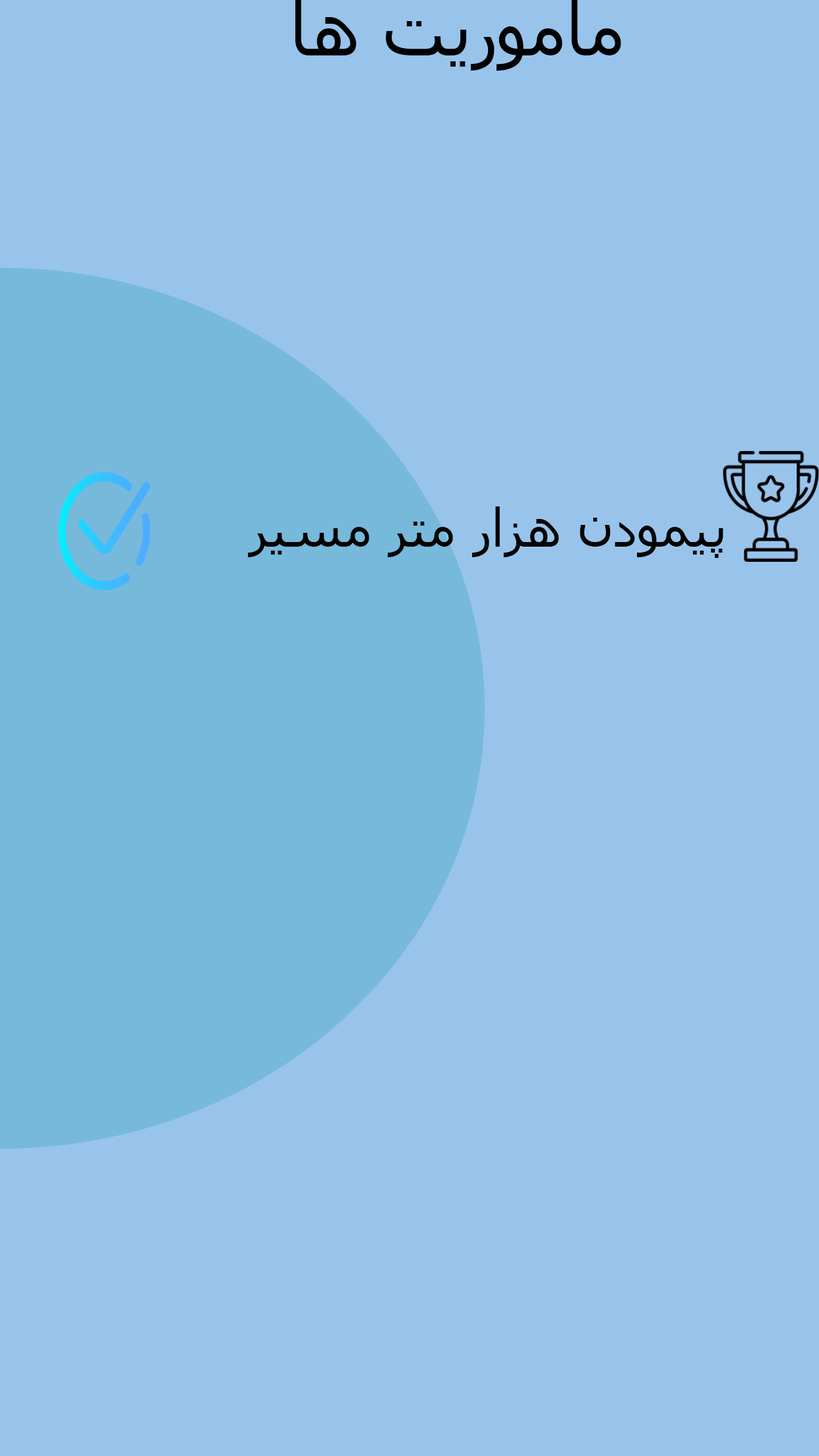
<style>
.page{position:relative;width:819px;height:1456px;background:#98c4ec}
.page>*{position:absolute;margin:0}
.t1{font:72.5px "Tahoma";color:#020202}
.t2{font:52.8px "Tahoma";color:#020202}
</style>
<div class="page">
<p class="t1" style="left:295px;top:0px;width:326px;height:71px">ماموریت ها</p>
<p class="t2" style="left:248px;top:506px;width:475px;height:52px">پیمودن هزار متر مسیر</p>
</div>
